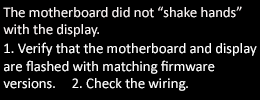
<style>
.page{position:relative;width:260px;height:100px;background:#000000}
.page>*{position:absolute;margin:0}
.t1{font:14.7px "Calibri";color:#faf5f5}
.t2{font:14.7px "Calibri";color:#ffffff}
</style>
<div class="page">
<p class="t1" style="left:3px;top:6px;width:239px;height:31px">The motherboard did not “shake hands”<br>with the display.</p>
<p class="t2" style="left:3px;top:42px;width:254px;height:47px">1. Verify that the motherboard and display <br>are flashed with matching firmware <br>versions.</p>
<p class="t2" style="left:72px;top:78px;width:116px;height:13px">2. Check the wiring.</p>
</div>
